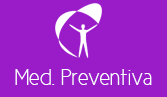
<style>
.page{position:relative;width:167px;height:97px;background:#9a1cc9}
.page>*{position:absolute;margin:0}
.t1{font:22.7px "CicleFina";color:#ffffff}
</style>
<div class="page">
<p class="t1" style="left:15px;top:69px;width:137px;height:16px">Med. Preventiva</p>
</div>
